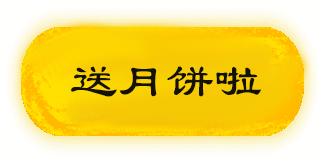
<style>
.page{position:relative;width:324px;height:163px;background:#fffffd}
.page>*{position:absolute;margin:0}
.t1{font:48px "LiSu";color:#141206}
</style>
<div class="page">
<p class="t1" style="left:71px;top:66px;width:191px;height:31px">送月饼啦</p>
</div>
